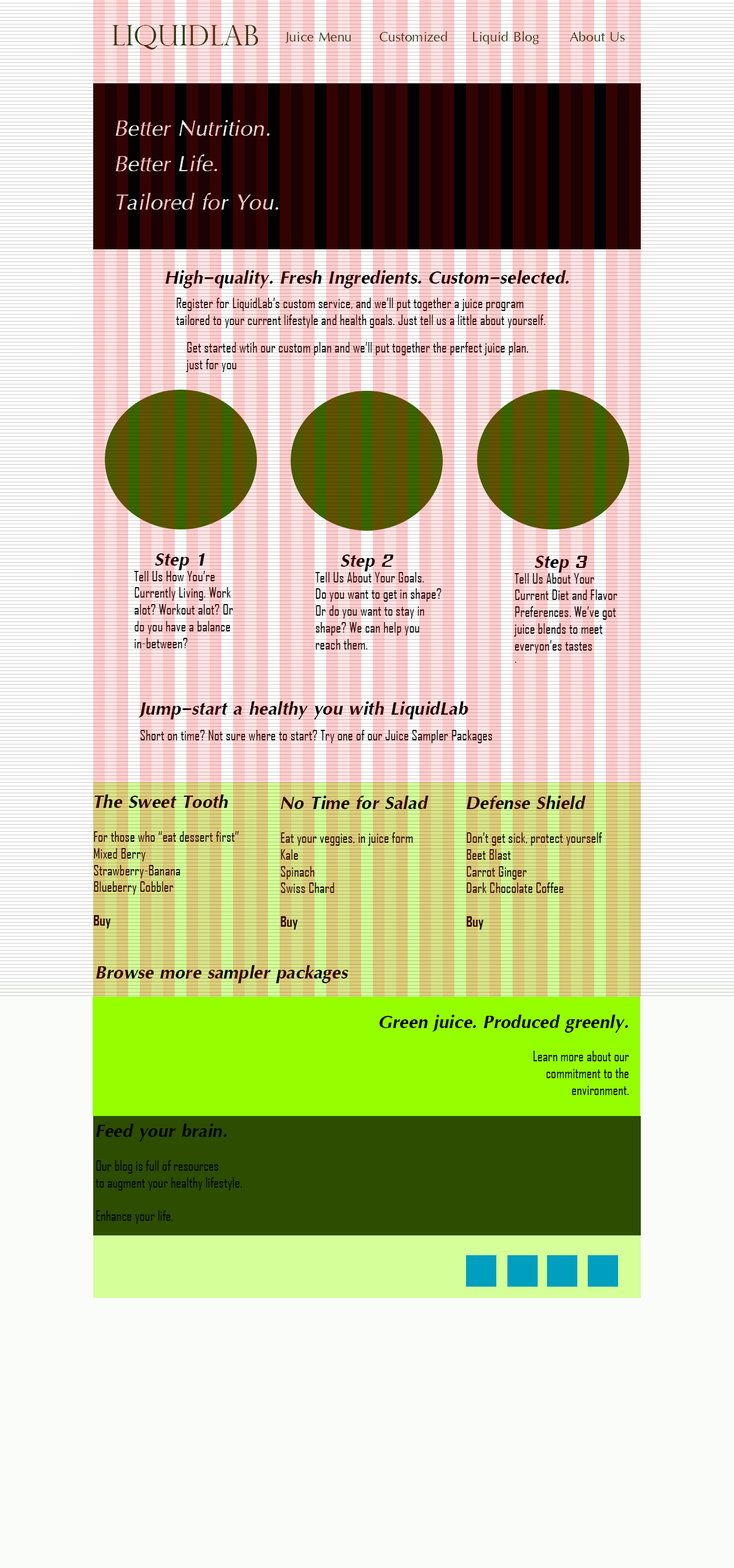
<style>
.page{position:relative;width:734px;height:1568px;background:#fafcfa}
.page>*{position:absolute;margin:0}
.t1{font:28px "PerpetuaTitlingMT-Light";color:#2c400f}
.t2{font:21px "IrisUPC";color:#4d330d}
.t3{font:21px "IrisUPC";color:#42330d}
.t4{font:34.9px "IrisUPCItalic"}
.t5{font:28px "IrisUPCBoldItalic"}
.t6{font:14px "AgencyFB-Reg"}
.t7{font:10.5px "BaskOldFace"}
.t8{font:14px "AgencyFB-Bold"}
.t9{font:14px "AgencyFB-Reg";color:#050505}
.t10{font:28px "IrisUPCBoldItalic";color:#050505}
</style>
<div class="page">
<p class="t1" style="left:112px;top:25px;width:147px;height:25px">LiquidLab</p>
<p class="t2" style="left:285px;top:32px;width:66px;height:11px">Juice Menu</p>
<p class="t2" style="left:379px;top:31px;width:68px;height:10px">Customized</p>
<p class="t2" style="left:472px;top:31px;width:67px;height:13px">Liquid Blog</p>
<p class="t3" style="left:570px;top:31px;width:55px;height:10px">About Us</p>
<p class="t4" style="left:115px;top:120px;width:155px;height:16px">Better Nutrition.</p>
<p class="t4" style="left:115px;top:154px;width:102px;height:17px">Better Life.</p>
<p class="t4" style="left:116px;top:193px;width:162px;height:17px">Tailored for You.</p>
<p class="t5" style="left:165px;top:270px;width:403px;height:18px">High-quality. Fresh Ingredients. Custom-selected.</p>
<p class="t6" style="left:176px;top:298px;width:369px;height:30px">Register for LiquidLab’s custom service, and we’ll put together a juice program <br>tailored to your current lifestyle and health goals. Just tell us a little about yourself.</p>
<p class="t6" style="left:186px;top:342px;width:342px;height:30px">Get started wtih our custom plan and we’ll put together the perfect juice plan,<br>just for you</p>
<p class="t5" style="left:155px;top:553px;width:50px;height:17px">Step 1</p>
<p class="t5" style="left:341px;top:555px;width:53px;height:16px">Step 2</p>
<p class="t5" style="left:535px;top:556px;width:52px;height:17px">Step 3</p>
<p class="t6" style="left:134px;top:571px;width:99px;height:77px">Tell Us How You’re<br>Currently Living. Work<br>alot? Workout alot? Or<br>do you have a balance<br>in-between?</p>
<p class="t6" style="left:315px;top:572px;width:127px;height:77px">Tell Us About Your Goals.<br>Do you want to get in shape?<br>Or do you want to stay in <br>shape? We can help you <br>reach them.</p>
<p class="t6" style="left:514px;top:573px;width:103px;height:90px">Tell Us About Your<br>Current Diet and Flavor<br>Preferences. We’ve got<br>juice blends to meet <br>everyon’es tastes  <br><span class="t7">.</span></p>
<p class="t5" style="left:139px;top:701px;width:329px;height:18px">Jump-start a healthy you with LiquidLab</p>
<p class="t6" style="left:140px;top:730px;width:352px;height:13px">Short on time? Not sure where to start? Try one of our Juice Sampler Packages</p>
<p class="t6" style="left:94px;top:794px;width:145px;height:134px"><span class="t5">The Sweet Tooth<br><br></span>For those who “eat dessert first”<br>Mixed Berry<br>Strawberry-Banana<br>Blueberry Cobbler<br><br><span class="t8">Buy</span></p>
<p class="t6" style="left:281px;top:796px;width:148px;height:134px"><span class="t5">No Time for Salad<br><br></span>Eat your veggies, in juice form <br>Kale<br>Spinach<br>Swiss Chard<br><br><span class="t8">Buy</span></p>
<p class="t6" style="left:467px;top:796px;width:135px;height:134px"><span class="t5">Defense Shield<br><br></span>Don’t get sick, protect yourself<br>Beet Blast<br>Carrot Ginger<br>Dark Chocolate Coffee<br><br><span class="t8">Buy</span></p>
<p class="t5" style="left:96px;top:965px;width:252px;height:18px">Browse more sampler packages</p>
<p class="t9" style="left:379px;top:1015px;width:250px;height:80px;text-align:right"><span class="t10">Green juice. Produced greenly. <br><br></span>Learn more about our<br>commitment to the <br>environment.</p>
<p class="t9" style="left:96px;top:1124px;width:146px;height:100px"><span class="t10">Feed your brain. <br><br></span>Our blog is full of resources<br>to augment your healthy lifestyle.<br><br>Enhance your life.</p>
</div>
